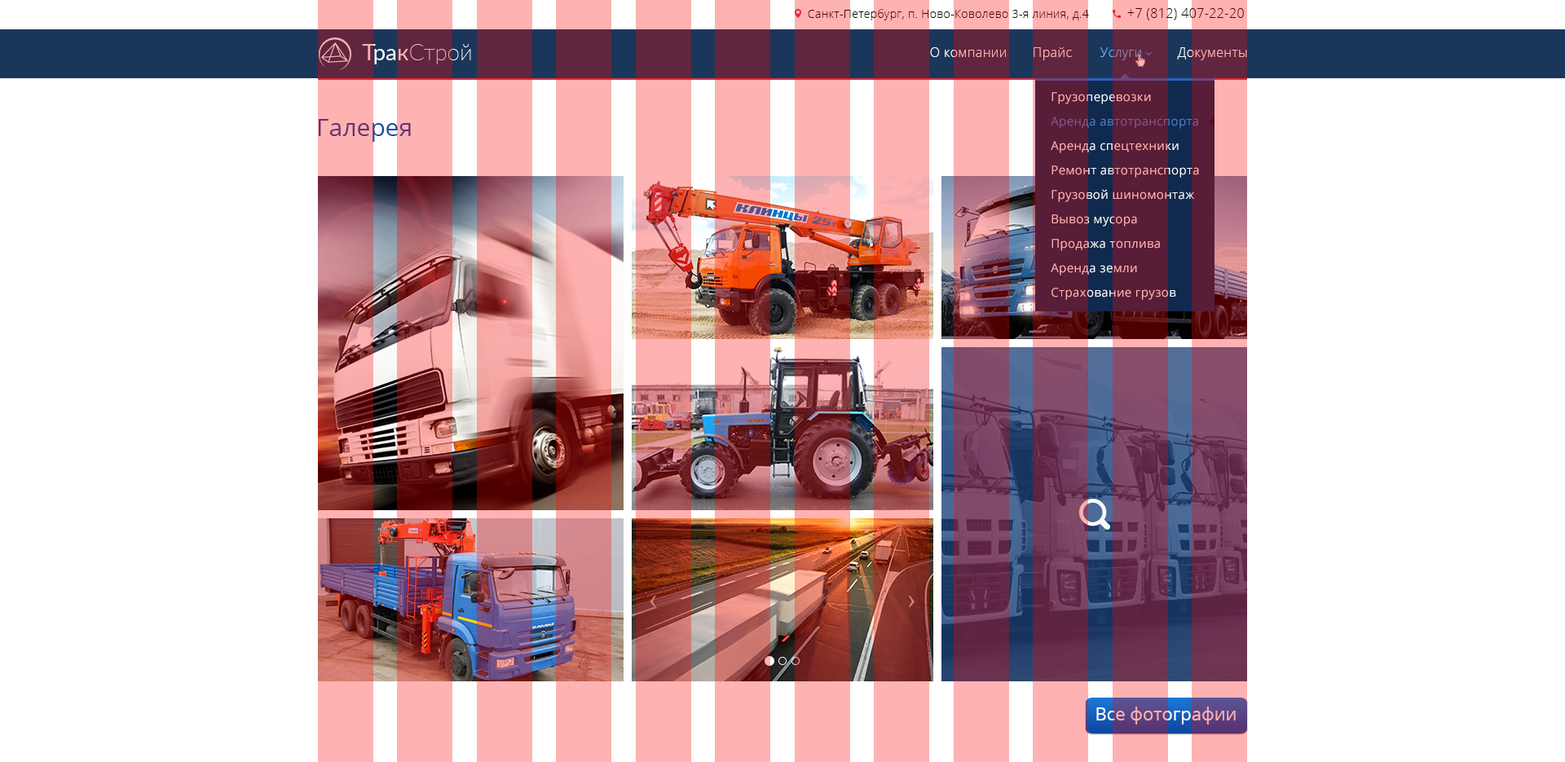
<style>
.page{position:relative;width:1565px;height:762px;background:#ffffff}
.page>*{position:absolute;margin:0}
.t1{font:11.4px "OpenSans-Light";letter-spacing:0.025em;color:#4e0101}
.t2{font:13px "OpenSans-Light";letter-spacing:0.025em;color:#4d0000;text-transform:uppercase}
.t3{font:13px "OpenSans-Light";letter-spacing:0.025em;color:#ffb2b2}
.t4{font:13px "OpenSans-Light";letter-spacing:0.025em;color:#937eac}
.t5{font:13px "OpenSans-Light";letter-spacing:0.025em}
.t6{font:12.2px/24.5px "OpenSans";letter-spacing:0.025em}
.t7{font:12.2px/14.7px "OpenSans";letter-spacing:0.025em}
.t8{font:12.2px "OpenSans";letter-spacing:0.025em}
.t9{font:24.5px "OpenSans";color:#5e366f}
.t10{font:17.9px "OpenSans"}
</style>
<div class="page">
<p class="t1" style="left:808px;top:9px;width:281px;height:11px">Санкт-Петербург, п. Ново-Коволево 3-я линия, д.4</p>
<p class="t2" style="left:1127px;top:8px;width:117px;height:12px">+7 (812) 407-22-20</p>
<p class="t3" style="left:930px;top:47px;width:76px;height:10px">О компании</p>
<p class="t3" style="left:1033px;top:47px;width:39px;height:13px">Прайс</p>
<p class="t4" style="left:1099px;top:47px;width:42px;height:13px">Услуги</p>
<p class="t5" style="left:1177px;top:47px;width:70px;height:13px">Документы</p>
<p class="t6" style="left:1051px;top:92px;width:148px;height:208px">Грузоперевозки<br>Аренда автотранспорта<br>Аренда спецтехники<br>Ремо<span class="t7">нт автотранспорта<br></span>Грузовой шиномонтаж<br>Вывоз мусора<br>П<span class="t7">родажа топли</span><span class="t8">ва<br></span>Аренда земли<br>Страхование грузов</p>
<p class="t9" style="left:319px;top:119px;width:92px;height:23px">Галерея</p>
<p class="t10" style="left:1096px;top:707px;width:140px;height:18px">Все фотографии</p>
</div>
